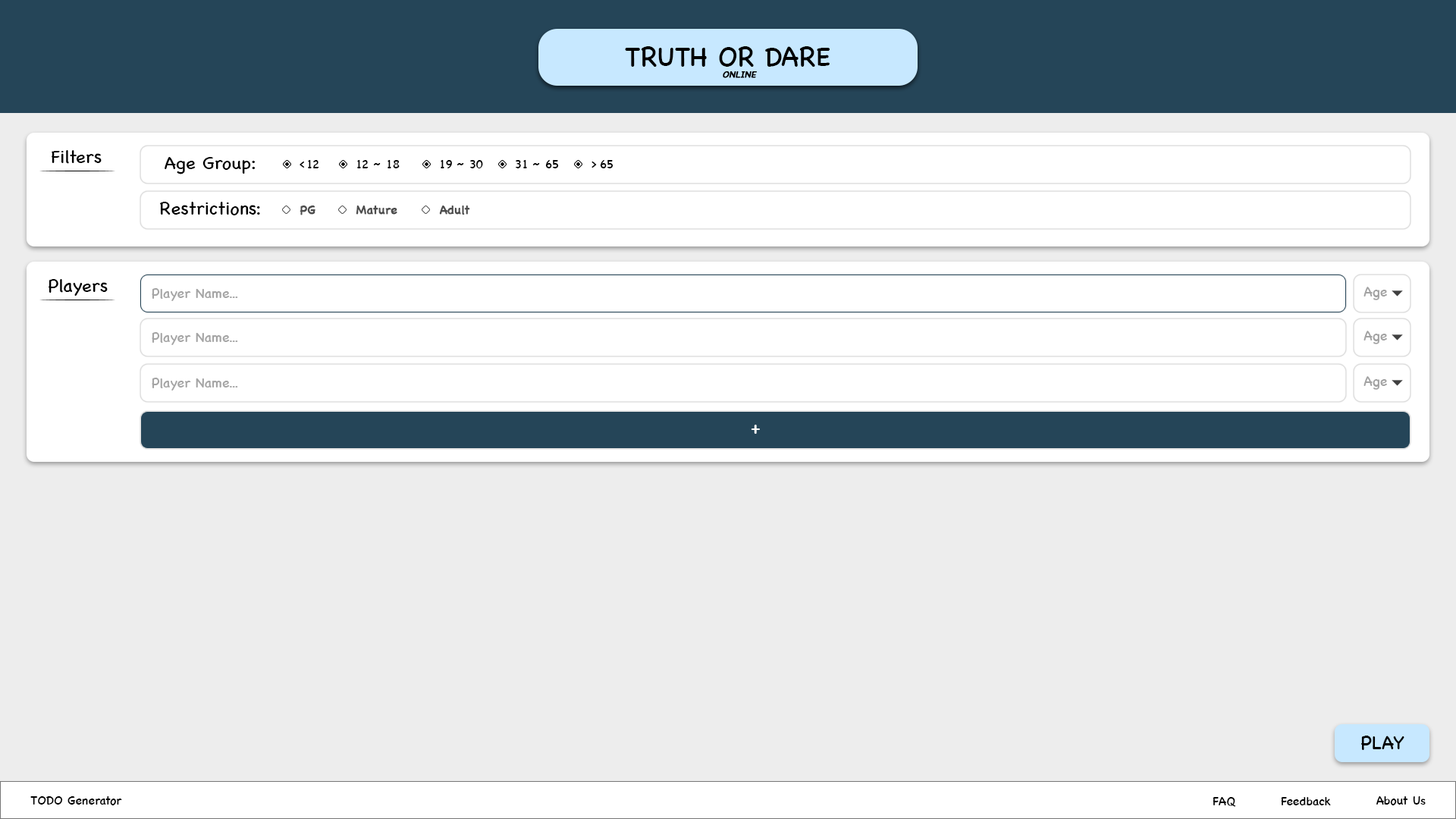
<style>
.page{position:relative;width:1456px;height:819px;background:#ededed}
.page>*{position:absolute;margin:0}
.t1{font:27.3px "ChalkboardSE-Regular";color:#000000}
.t2{font:9.1px "ChalkboardSE-Regular";color:#000000;font-weight:bold;font-style:italic}
.t3{font:18.2px "ChalkboardSE-Regular";color:#000000}
.t4{font:12.1px "ChalkboardSE-Regular";color:#000000}
.t5{font:12.1px "ChalkboardSE-Regular";color:#4d4d4d;font-weight:bold}
.t6{font:13.6px "ChalkboardSE-Regular";color:#a5a5a5}
.t7{font:13.6px "ChalkboardSE-Regular";color:#a3a3a3}
.t8{font:18.2px "ChalkboardSE-Regular";color:#ffffff}
.t9{font:19px "ChalkboardSE-Regular";color:#000000}
</style>
<div class="page">
<p class="t1" style="left:625px;top:46px;width:205px;height:21px">TRUTH OR DARE</p>
<p class="t2" style="left:723px;top:71px;width:34px;height:7px">ONLINE</p>
<p class="t3" style="left:52px;top:150px;width:50px;height:14px">Filters</p>
<p class="t3" style="left:165px;top:157px;width:91px;height:17px">Age Group:</p>
<p class="t4" style="left:300px;top:162px;width:5px;height:6px">&lt;</p>
<p class="t4" style="left:308px;top:160px;width:11px;height:8px">12</p>
<p class="t4" style="left:357px;top:160px;width:12px;height:8px">12</p>
<p class="t4" style="left:388px;top:160px;width:12px;height:8px">18</p>
<p class="t4" style="left:441px;top:160px;width:11px;height:8px">19</p>
<p class="t4" style="left:470px;top:160px;width:13px;height:8px">30</p>
<p class="t4" style="left:516px;top:160px;width:11px;height:8px">31</p>
<p class="t4" style="left:545px;top:160px;width:14px;height:8px">65</p>
<p class="t4" style="left:591px;top:162px;width:6px;height:6px">&gt;</p>
<p class="t4" style="left:600px;top:160px;width:13px;height:8px">65</p>
<p class="t4" style="left:373px;top:163px;width:8px;height:2px">~</p>
<p class="t4" style="left:457px;top:163px;width:7px;height:2px">~</p>
<p class="t4" style="left:532px;top:163px;width:8px;height:2px">~</p>
<p class="t3" style="left:160px;top:202px;width:100px;height:13px">Restrictions:</p>
<p class="t5" style="left:300px;top:206px;width:15px;height:9px">PG</p>
<p class="t5" style="left:356px;top:206px;width:41px;height:9px">Mature</p>
<p class="t5" style="left:439px;top:206px;width:31px;height:9px">Adult</p>
<p class="t3" style="left:49px;top:279px;width:59px;height:17px">Players</p>
<p class="t6" style="left:152px;top:288px;width:86px;height:13px">Player Name...</p>
<p class="t7" style="left:1363px;top:287px;width:24px;height:13px">Age</p>
<p class="t6" style="left:152px;top:332px;width:86px;height:13px">Player Name...</p>
<p class="t7" style="left:1363px;top:331px;width:24px;height:13px">Age</p>
<p class="t6" style="left:152px;top:378px;width:86px;height:13px">Player Name...</p>
<p class="t7" style="left:1363px;top:376px;width:24px;height:14px">Age</p>
<p class="t8" style="left:751px;top:425px;width:9px;height:9px">+</p>
<p class="t9" style="left:1361px;top:736px;width:43px;height:14px">PLAY</p>
<p class="t4" style="left:30px;top:796px;width:92px;height:9px">TODO Generator</p>
<p class="t4" style="left:1213px;top:797px;width:23px;height:10px">FAQ</p>
<p class="t4" style="left:1281px;top:797px;width:50px;height:8px">Feedback</p>
<p class="t4" style="left:1376px;top:796px;width:50px;height:9px">About Us</p>
</div>
